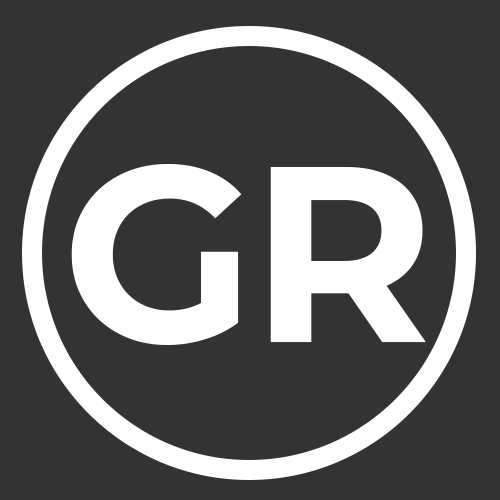
<style>
.page{position:relative;width:500px;height:500px;background:#333333}
.page>*{position:absolute;margin:0}
.t1{font:250px "Montserrat-Bold";color:#ffffff;text-transform:uppercase}
</style>
<div class="page">
<p class="t1" style="left:71px;top:164px;width:355px;height:181px">GR</p>
</div>
